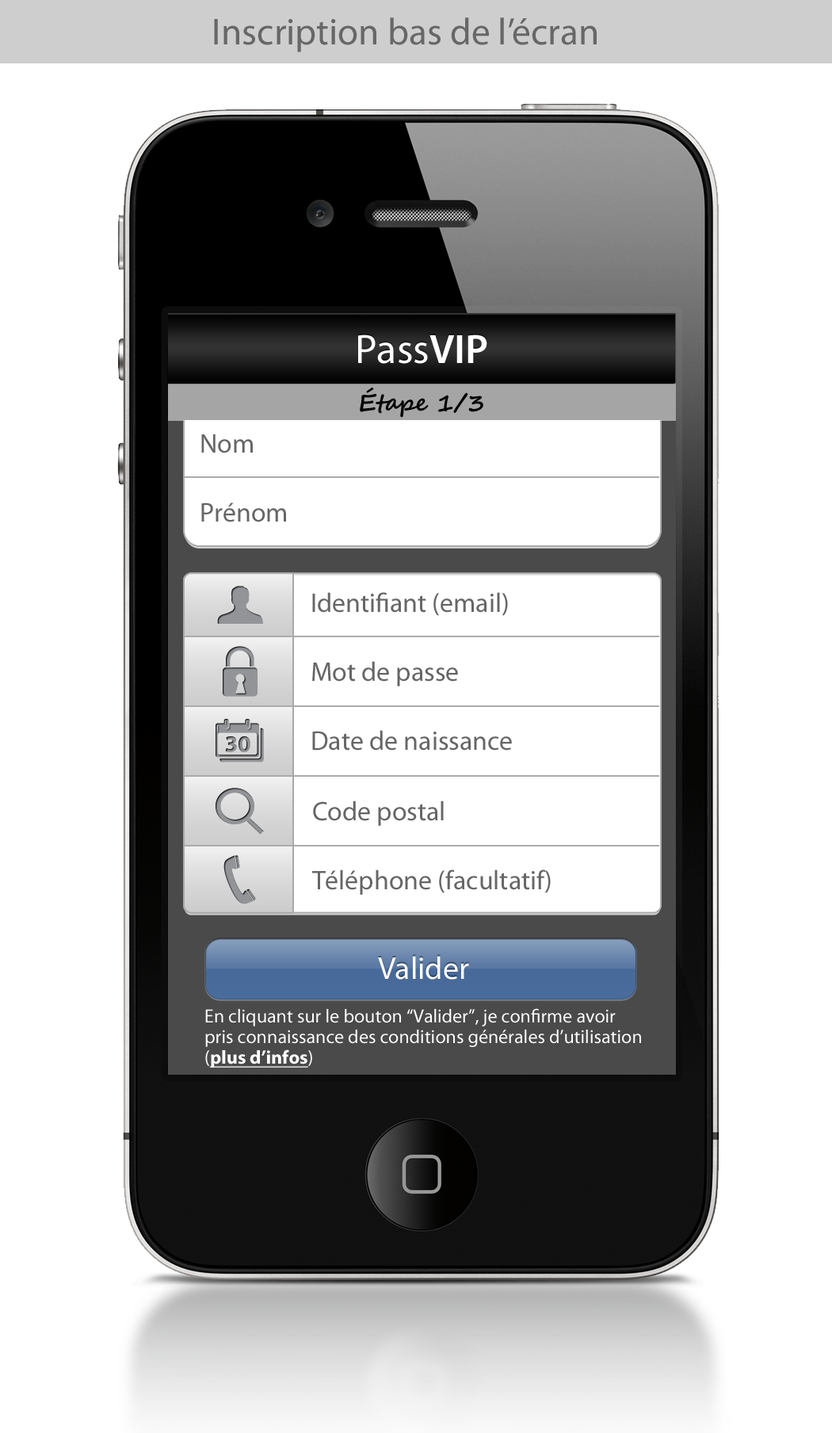
<style>
.page{position:relative;width:832px;height:1433px;background:#ffffff}
.page>*{position:absolute;margin:0}
.t1{font:37.7px "MyriadPro-Regular";color:#676767}
.t2{font:41.3px "MyriadPro-Regular";color:#ffffff}
.t3{font:41.3px "MyriadPro-Semibold";color:#ffffff}
.t4{font:23.8px "SegoeScript-Bold";color:#010101}
.t5{font:26.9px/69px "MyriadPro-Regular";color:#666666}
.t6{font:31.7px "MyriadPro-Regular";color:#ffffff}
.t7{font:19px/20.6px "MyriadPro-Regular";color:#ffffff}
.t8{font:19px/20.6px "MyriadPro-Bold";color:#ffffff;text-decoration:underline}
</style>
<div class="page">
<p class="t1" style="left:214px;top:17px;width:383px;height:35px">Inscription bas de l’écran</p>
<p class="t2" style="left:358px;top:334px;width:129px;height:30px">Pass<span class="t3">VIP</span></p>
<p class="t4" style="left:360px;top:388px;width:123px;height:30px">Étape 1/3</p>
<p class="t5" style="left:312px;top:592px;width:200px;height:159px">Identifiant (email)<br>Mot de passe<br>Date de naissance</p>
<p class="t5" style="left:312px;top:800px;width:239px;height:95px">Code postal<br>Téléphone (facultatif)</p>
<p class="t6" style="left:378px;top:956px;width:91px;height:24px">Valider</p>
<p class="t7" style="left:205px;top:1008px;width:436px;height:60px">En cliquant sur le bouton “Valider”, je confirme avoir<br>pris connaissance des conditions générales d’utilisation<br>(<span class="t8">plus d’infos</span>)</p>
</div>
